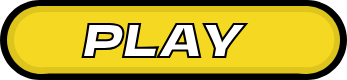
<style>
.page{position:relative;width:347px;height:80px;background:#f4d822}
.page>*{position:absolute;margin:0}
.t1{font:46.1px "DelaGothicOne-Regular";color:#ffffff}
</style>
<div class="page">
<p class="t1" style="left:78px;top:19px;width:173px;height:42px">PLAY</p>
</div>
